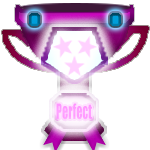
<style>
.page{position:relative;width:150px;height:150px;background:#ffffff}
.page>*{position:absolute;margin:0}
.t1{font:19.6px "Impact";color:#ff9eff;scale:0.62 1}
</style>
<div class="page">
<p class="t1" style="left:56px;top:103px;width:36px;height:17px">Perfect</p>
</div>
